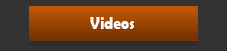
<style>
.page{position:relative;width:227px;height:51px;background:#333333}
.page>*{position:absolute;margin:0}
.t1{font:18.2px "BerlinSansFBDemi-Bold";color:#ffffff;scale:0.84 1}
</style>
<div class="page">
<p class="t1" style="left:90px;top:17px;width:45px;height:12px">Videos</p>
</div>
